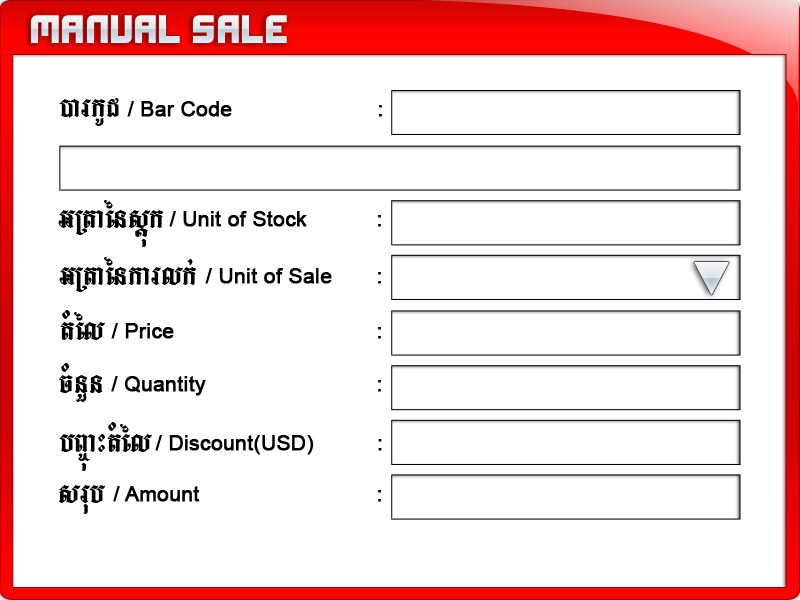
<style>
.page{position:relative;width:800px;height:600px;background:#ffffff}
.page>*{position:absolute;margin:0}
.t1{font:35.5px "Xifiction";color:#e1eaf0}
.t2{font:47.4px "LimonF3";color:#000000}
.t3{font:20.7px "ArialMT";color:#000000;font-weight:bold}
</style>
<div class="page">
<p class="t1" style="left:31px;top:15px;width:256px;height:28px">manual sale</p>
<p class="t2" style="left:59px;top:98px;width:60px;height:28px">)arkUd</p>
<p class="t3" style="left:127px;top:101px;width:255px;height:16px">/ Bar Code                       :</p>
<p class="t2" style="left:58px;top:200px;width:106px;height:47px">GRtaénsþúk</p>
<p class="t3" style="left:169px;top:211px;width:212px;height:16px">/ Unit of Stock           :</p>
<p class="t2" style="left:59px;top:257px;width:138px;height:35px">GRtaénkarlk;</p>
<p class="t3" style="left:205px;top:268px;width:176px;height:16px">/ Unit of Sale       :</p>
<p class="t2" style="left:60px;top:310px;width:45px;height:30px">tMél</p>
<p class="t3" style="left:111px;top:323px;width:270px;height:16px">/ Price                                :</p>
<p class="t2" style="left:58px;top:363px;width:45px;height:39px">cMnYn</p>
<p class="t3" style="left:111px;top:376px;width:270px;height:20px">/ Quantity                           :</p>
<p class="t2" style="left:59px;top:422px;width:93px;height:49px">bB©úaHtMél</p>
<p class="t3" style="left:155px;top:435px;width:227px;height:20px">/ Discount(USD)          :</p>
<p class="t2" style="left:58px;top:485px;width:48px;height:29px">srub</p>
<p class="t3" style="left:113px;top:486px;width:268px;height:16px">/ Amount                            :</p>
</div>
